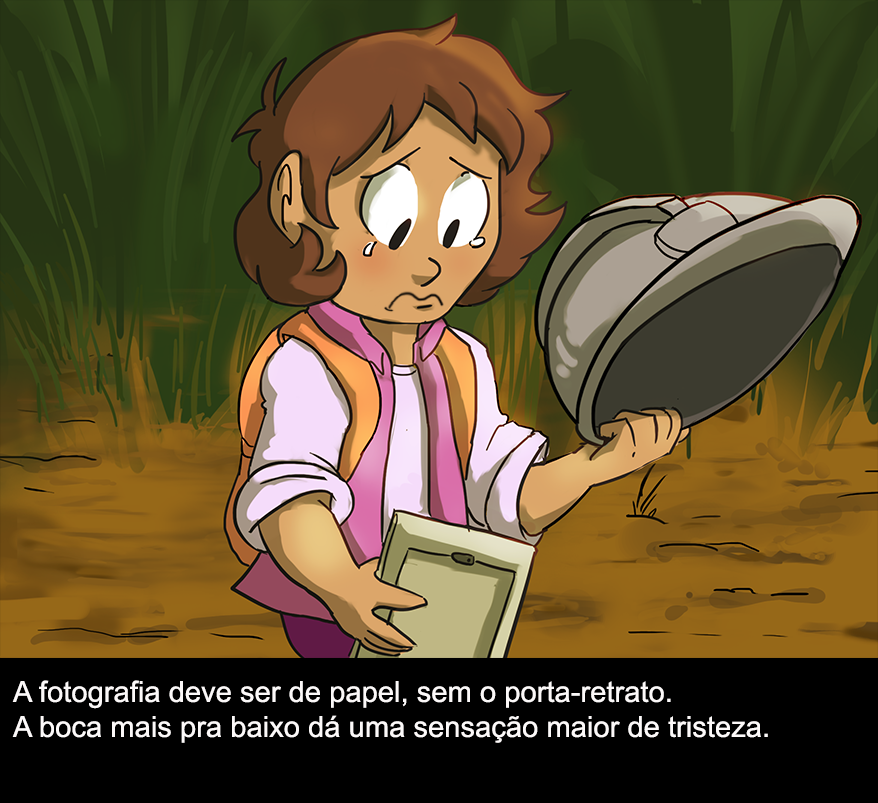
<style>
.page{position:relative;width:878px;height:803px}
.page>*{position:absolute;margin:0}
.t1{font:29.2px "ArialMT";color:#fcf9f9}
</style>
<div class="page">
<p class="t1" style="left:12px;top:680px;width:756px;height:63px">A fotografia deve ser de papel, sem o porta-retrato.<br>A boca mais pra baixo dá uma sensação maior de tristeza.</p>
</div>
